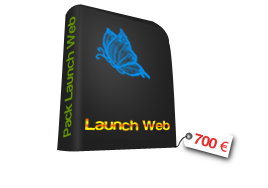
<style>
.page{position:relative;width:268px;height:188px;background:#ffffff}
.page>*{position:absolute;margin:0}
.t1{font:12px "Harabara";color:#669900;scale:1.4 1}
.t2{font:15px "Harabara";color:#ea2c2c}
.t3{font:15px "MyriadPro-Regular";color:#ea2c2c}
</style>
<div class="page">
<p class="t1" style="left:63px;top:16px;width:13px;height:122px;rotate:-88deg;opacity:0.9">Pack Launch Web</p>
<p class="t2" style="left:194px;top:133px;width:35px;height:19px;rotate:16deg">700 <span class="t3">€</span></p>
</div>
